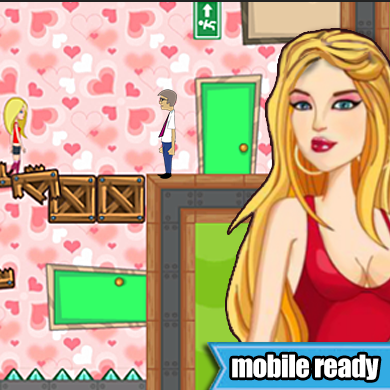
<style>
.page{position:relative;width:390px;height:390px}
.page>*{position:absolute;margin:0}
.t1{font:28.6px "Impact";letter-spacing:-0.02em;color:#ffffff}
</style>
<div class="page">
<p class="t1" style="left:232px;top:354px;width:147px;height:26px">mobile ready</p>
</div>
